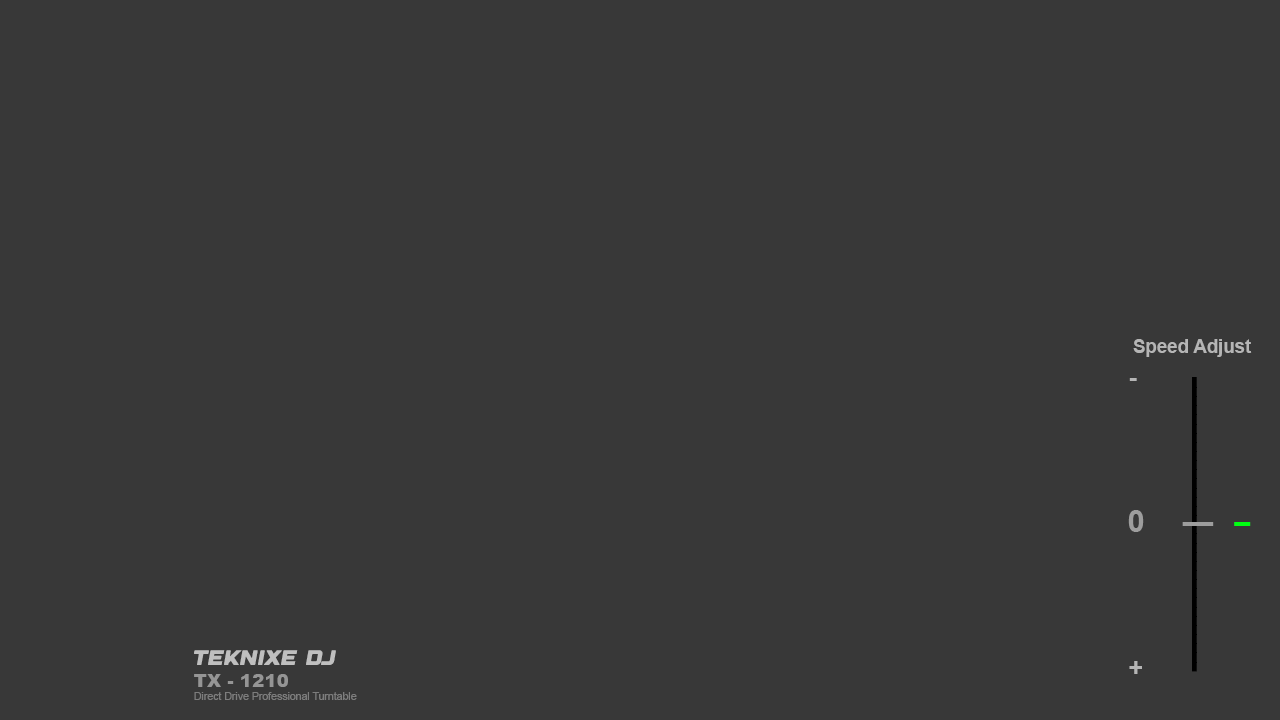
<style>
.page{position:relative;width:1280px;height:720px;background:#383838}
.page>*{position:absolute;margin:0}
.t1{font:18.6px "Arial-BoldMT";color:#b5b5b5}
.t2{font:25px "Arial-BoldMT";color:#b5b5b5}
.t3{font:31.4px "Arial-BoldMT";letter-spacing:-0.1em;color:#9d9d9d}
.t4{font:31.4px "Arial-BoldMT";letter-spacing:-0.1em;color:#00ff12}
.t5{font:10.5px "ArialMT";color:#7d7d7d}
.t6{font:21.1px "DesignerRegular";color:#bfbfbf}
.t7{font:18.4px "Arial-Black";color:#959595}
</style>
<div class="page">
<p class="t1" style="left:1133px;top:339px;width:119px;height:18px">Speed Adjust</p>
<p class="t2" style="left:1129px;top:378px;width:8px;height:3px">-</p>
<p class="t3" style="left:1128px;top:510px;width:123px;height:22px">0       ----    <span class="t4">--</span></p>
<p class="t5" style="left:194px;top:650px;width:163px;height:50px"><span class="t6">TEKNIXE DJ<br></span><span class="t7">TX - 1210<br></span>Direct Drive Professional Turntable</p>
<p class="t2" style="left:1129px;top:661px;width:13px;height:13px">+</p>
</div>
